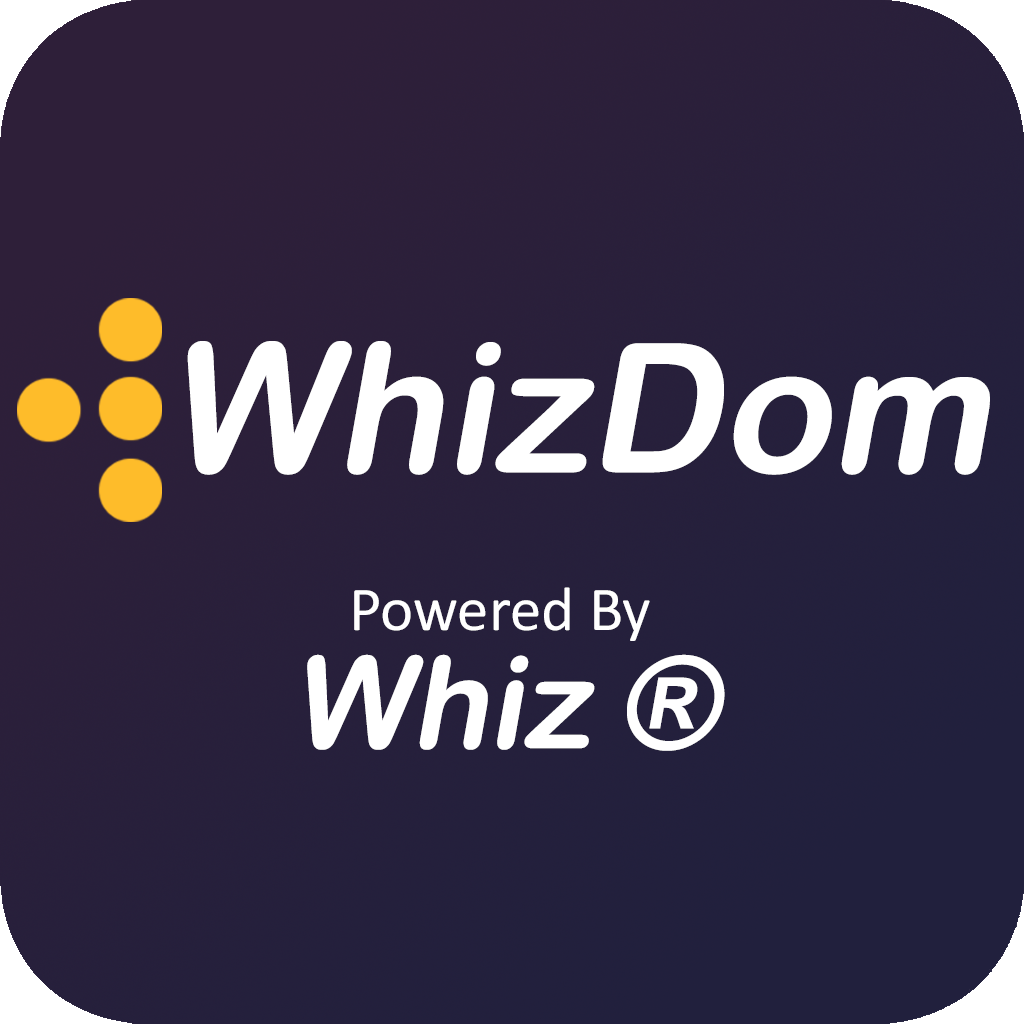
<style>
.page{position:relative;width:1024px;height:1024px}
.page>*{position:absolute;margin:0}
.t1{font:180.3px "ArialRoundedMTBold";color:#ffffff;font-style:italic}
.t2{font:62.8px "Calibri";color:#ffffff}
.t3{font:127.9px "ArialRoundedMTBold";color:#ffffff;font-style:italic}
</style>
<div class="page">
<p class="t1" style="left:187px;top:341px;width:803px;height:134px">WhizDom</p>
<p class="t2" style="left:354px;top:587px;width:296px;height:54px">Powered By</p>
<p class="t3" style="left:307px;top:654px;width:418px;height:97px">Whiz ®</p>
</div>
